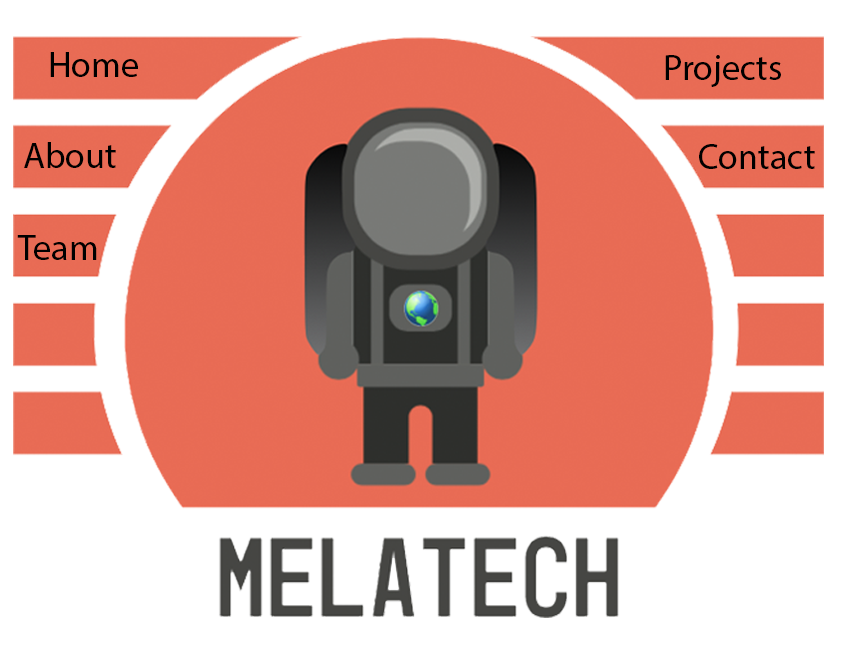
<style>
.page{position:relative;width:851px;height:667px;background:#ffffff}
.page>*{position:absolute;margin:0}
.t1{font:36px "MyriadPro-Regular";color:#000000}
</style>
<div class="page">
<p class="t1" style="left:50px;top:52px;width:88px;height:25px">Home</p>
<p class="t1" style="left:665px;top:55px;width:116px;height:32px">Projects</p>
<p class="t1" style="left:24px;top:142px;width:92px;height:26px">About</p>
<p class="t1" style="left:699px;top:144px;width:116px;height:25px">Contact</p>
<p class="t1" style="left:17px;top:235px;width:80px;height:25px">Team</p>
</div>
